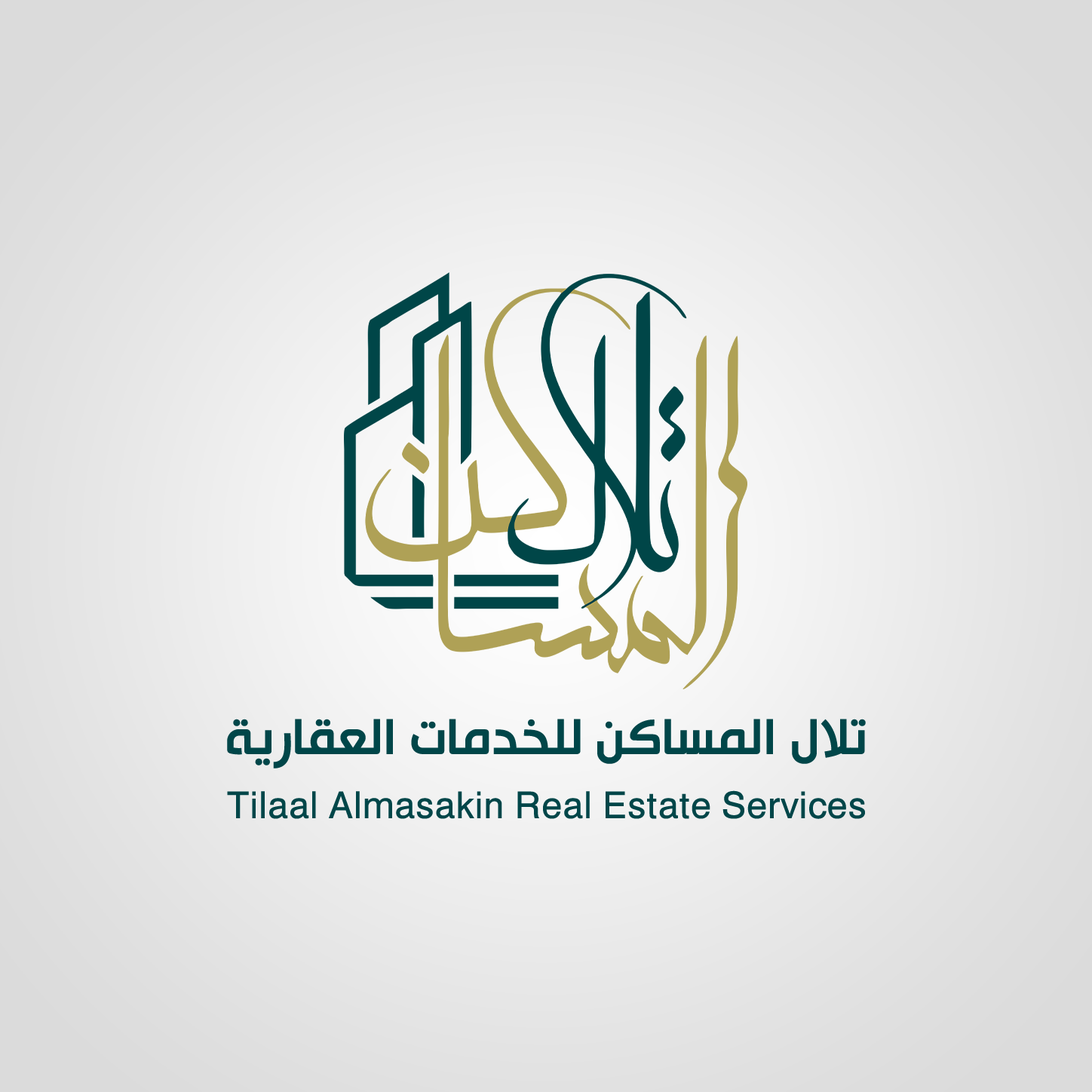
<style>
.page{position:relative;width:1092px;height:1092px}
.page>*{position:absolute;margin:0}
.t1{font:59.2px "HacenTunisia";color:#004649}
.t2{font:41.8px "HacenTunisia";letter-spacing:0.02em;color:#004649}
</style>
<div class="page">
<p class="t1" style="left:227px;top:719px;width:639px;height:49px">تلال المساكن للخدمات العقارية</p>
<p class="t2" style="left:227px;top:790px;width:638px;height:29px">Tilaal Almasakin Real Estate Services</p>
</div>
